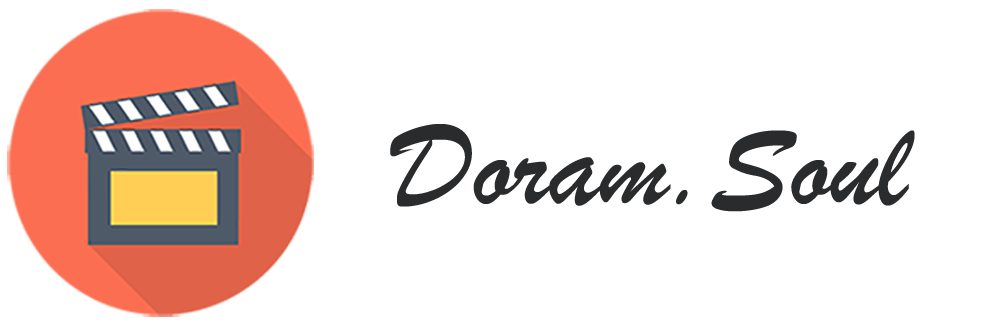
<style>
.page{position:relative;width:1000px;height:327px;background:#ffffff}
.page>*{position:absolute;margin:0}
.t1{font:125px "BrushScriptMT";color:#2a2b2c}
</style>
<div class="page">
<p class="t1" style="left:390px;top:124px;width:525px;height:88px">Doram.Soul</p>
</div>
